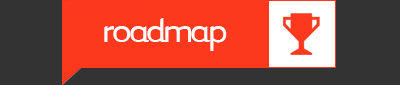
<style>
.page{position:relative;width:400px;height:85px;background:#333333}
.page>*{position:absolute;margin:0}
.t1{font:39px "TarzanaWide";letter-spacing:-0.13em;color:#ffffff;scale:0.95 1}
</style>
<div class="page">
<p class="t1" style="left:104px;top:18px;width:123px;height:33px">roadmap</p>
</div>
